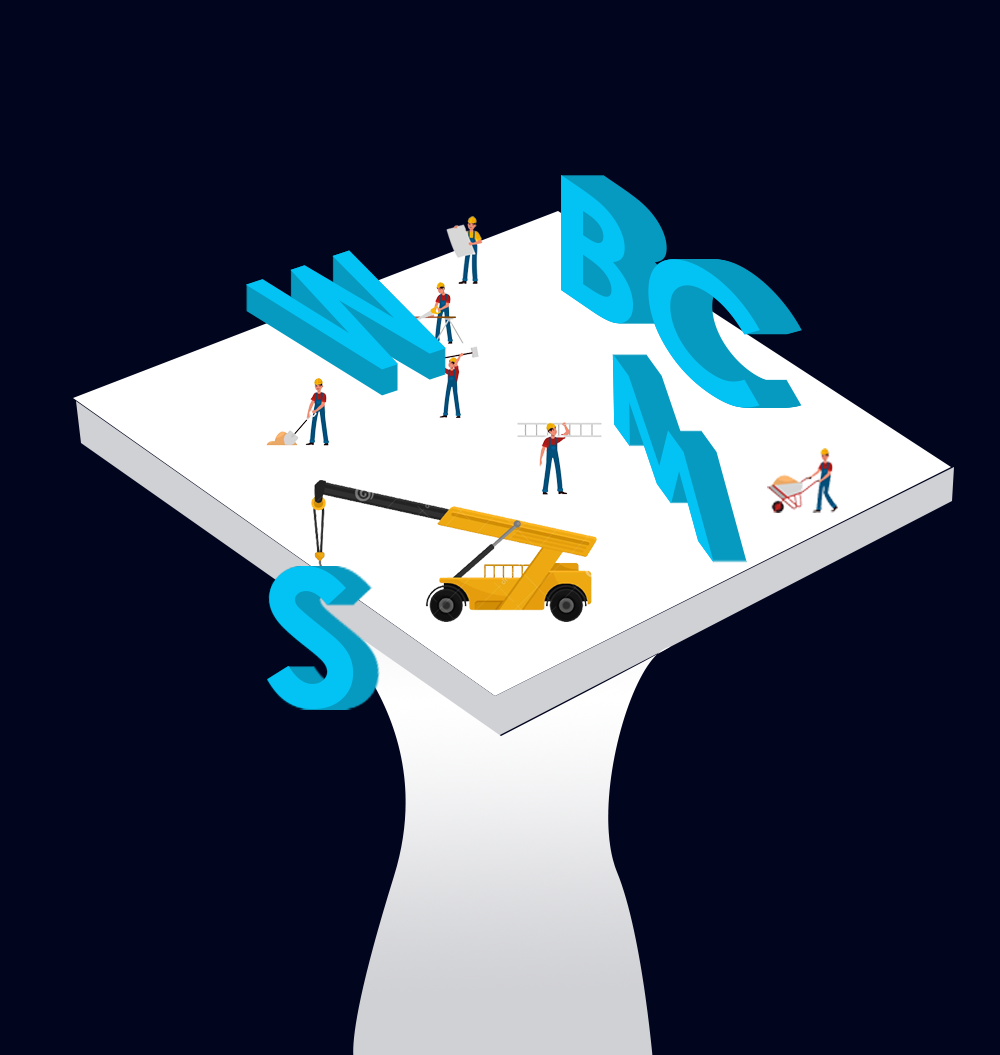
<style>
.page{position:relative;width:1000px;height:1055px;background:#02051e}
.page>*{position:absolute;margin:0}
.t1{font:159.9px "CenturyGothic-Bold";color:#03c3f5;scale:1.21 1}
.t2{font:205.5px "CenturyGothic-Bold";color:#03c3f5;scale:0.62 1}
.t3{font:128.1px "CenturyGothic-Bold";color:#03c3f5;scale:1.57 1}
.t4{font:191px "CenturyGothic-Bold";color:#03c3f5}
</style>
<div class="page">
<p class="t1" style="left:561px;top:175px;width:199px;height:233px;rotate:34deg">BC</p>
<p class="t2" style="left:246px;top:250px;width:200px;height:120px;rotate:-18deg">W</p>
<p class="t3" style="left:612px;top:354px;width:102px;height:209px;rotate:54deg">M</p>
<p class="t4" style="left:267px;top:566px;width:87px;height:143px">S</p>
</div>
